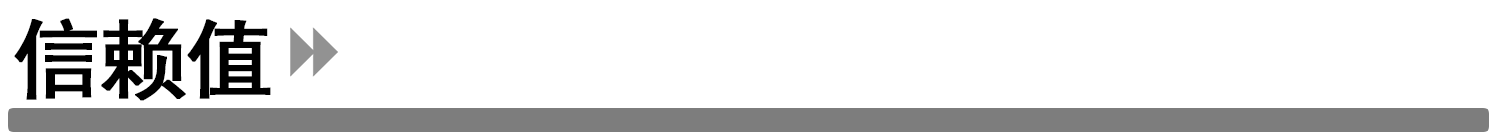
<style>
.page{position:relative;width:1497px;height:140px;background:#ffffff}
.page>*{position:absolute;margin:0}
.t1{font:88px "SimHei";color:#000000;font-weight:bold}
</style>
<div class="page">
<p class="t1" style="left:14px;top:18px;width:257px;height:83px">信赖值</p>
</div>
